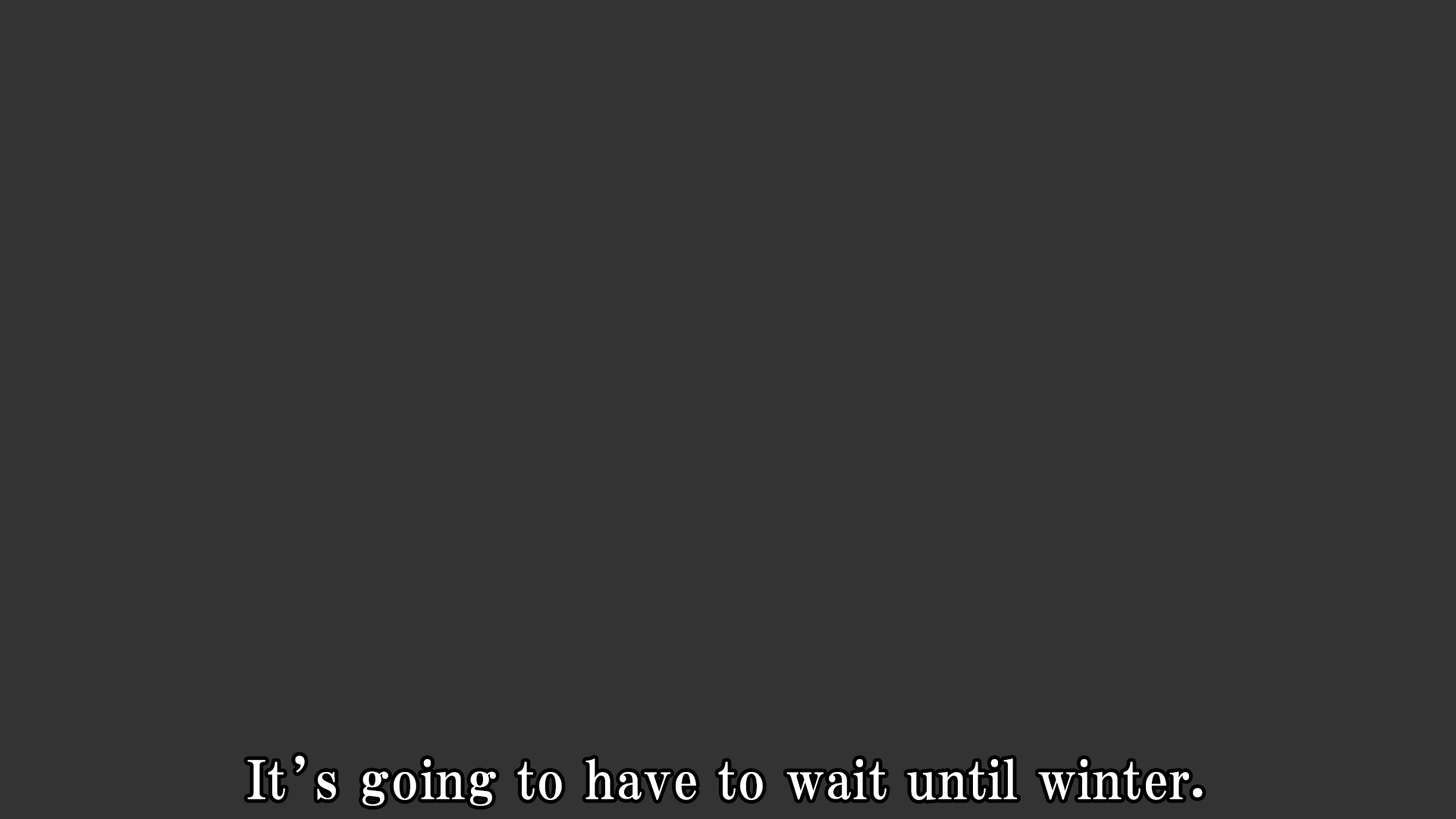
<style>
.page{position:relative;width:1456px;height:819px;background:#333333}
.page>*{position:absolute;margin:0}
.t1{font:53.1px "HGPMinchoE";letter-spacing:0.025em;color:#ffffff}
</style>
<div class="page">
<p class="t1" style="left:247px;top:755px;width:956px;height:51px">It’s going to have to wait until winter.</p>
</div>
